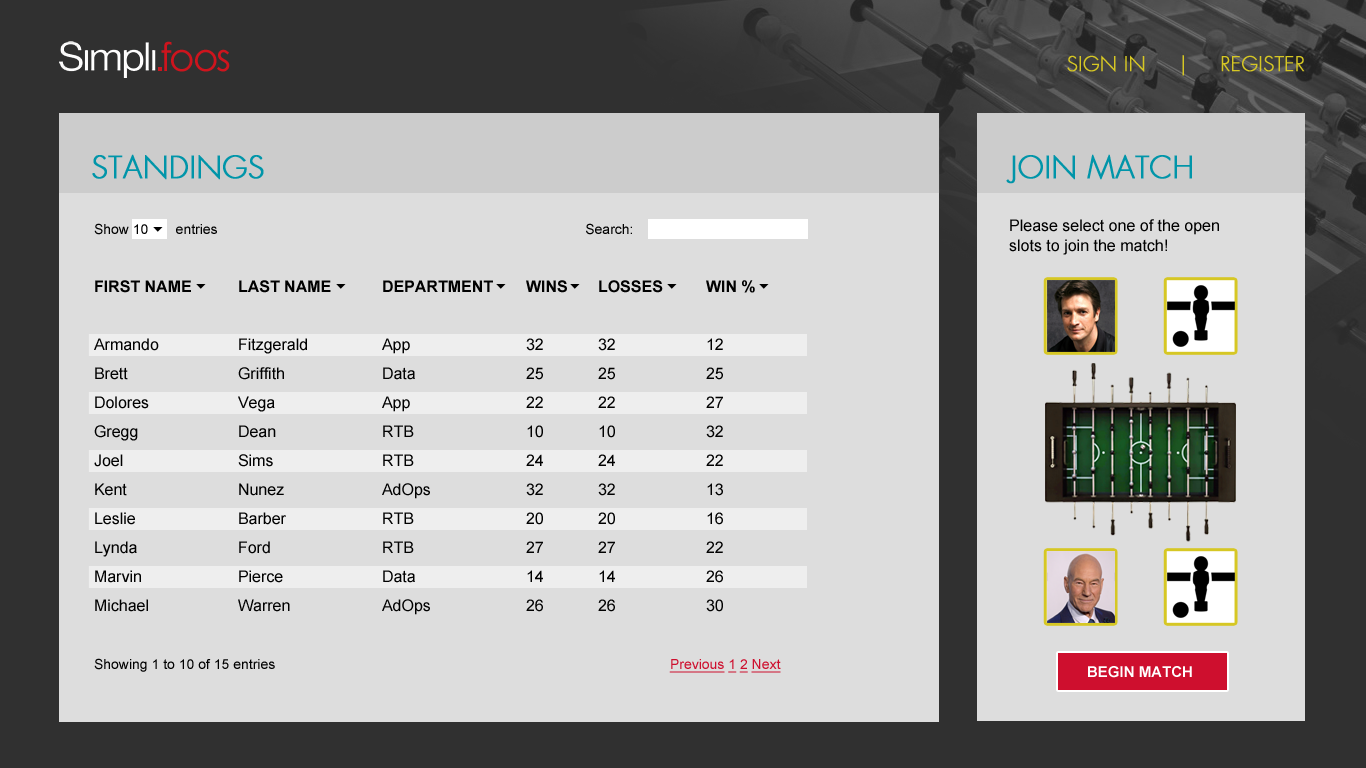
<style>
.page{position:relative;width:1366px;height:768px;background:#dddddd}
.page>*{position:absolute;margin:0}
.t1{font:20px "FuturaLT-Light";color:#d6c724;font-weight:bold}
.t2{font:30px "FuturaLT-Light";color:#0095a9;font-weight:bold}
.t3{font:16px "ArialMT";color:#010101}
.t4{font:16px/29px "ArialMT";color:#010101}
.t5{font:14px/29px "ArialMT";color:#010101}
.t6{font:16px/29px "Arial-BoldMT";color:#010101;text-transform:uppercase}
.t7{font:14px/29px "ArialMT";color:#ce0f2e;text-decoration:underline}
.t8{font:15px "Arial-BoldMT";color:#ffffff}
</style>
<div class="page">
<p class="t1" style="left:1067px;top:55px;width:238px;height:21px">SIGN IN     |     REGISTER</p>
<p class="t2" style="left:92px;top:154px;width:172px;height:26px">STANDINGS</p>
<p class="t2" style="left:1006px;top:154px;width:186px;height:30px">JOIN MATCH</p>
<p class="t3" style="left:1009px;top:219px;width:210px;height:36px">Please select one of the open slots to join the match!</p>
<p class="t4" style="left:94px;top:223px;width:687px;height:450px"><span class="t5">Show 10       entries                Search:<br><br></span><span class="t6">First Name  Last Name  Department Wins Losses  Win %<br></span><br>Armando   Fitzgerald   App    32  32   12<br>Brett    Griffith   Data    25  25   25<br>Dolores    Vega   App    22  22   27<br>Gregg    Dean   RTB    10  10   32<br>Joel    Sims    RTB    24  24   22<br>Kent    Nunez   AdOps   32  32   13<br>Leslie   Barber   RTB    20  20   16<br>Lynda   Ford    RTB    27  27   22<br>Marvin   Pierce   Data    14  14   26<br>Michael   Warren   AdOps   26  26   30<br><br><span class="t5">Showing 1 to 10 of 15 entries           </span><span class="t7">Previous 1 2 Next</span></p>
<p class="t8" style="left:1088px;top:666px;width:104px;height:12px">BEGIN MATCH</p>
</div>
